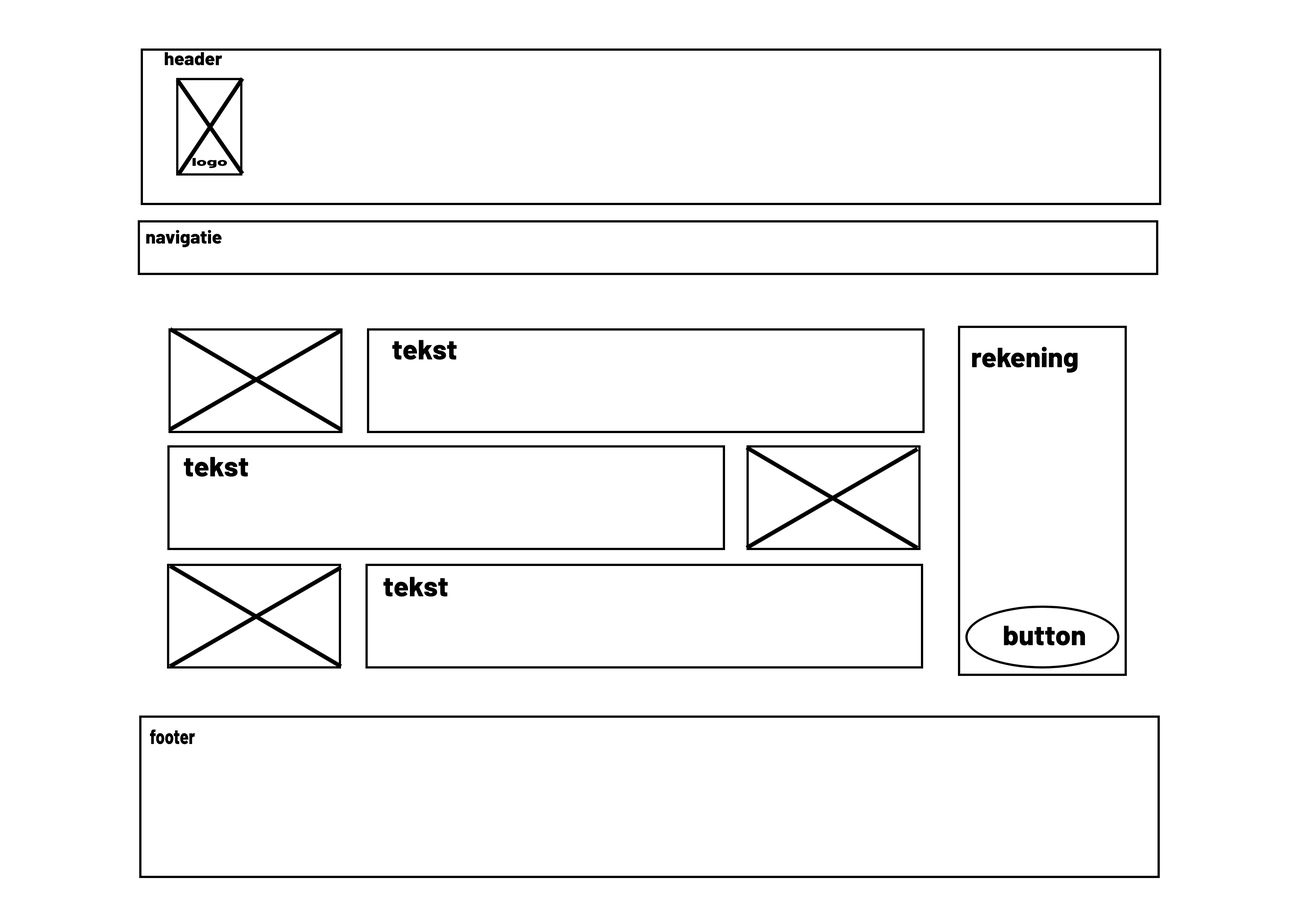
<style>
.page{position:relative;width:1299px;height:918px;background:#ffffff}
.page>*{position:absolute;margin:0}
.t1{font:18.5px "Barlow-ExtraBold";color:#000000}
.t2{font:11.2px "Barlow-ExtraBold";color:#000000;scale:1.66 1}
.t3{font:27.8px "Barlow-ExtraBold";color:#000000}
.t4{font:20.7px "Barlow-ExtraBold";color:#000000;scale:0.78 1}
</style>
<div class="page">
<p class="t1" style="left:165px;top:52px;width:57px;height:14px">header</p>
<p class="t2" style="left:193px;top:158px;width:34px;height:10px">logo</p>
<p class="t1" style="left:146px;top:230px;width:76px;height:17px">navigatie</p>
<p class="t3" style="left:392px;top:340px;width:65px;height:20px">tekst</p>
<p class="t3" style="left:972px;top:347px;width:105px;height:26px">rekening</p>
<p class="t3" style="left:184px;top:457px;width:64px;height:20px">tekst</p>
<p class="t3" style="left:383px;top:577px;width:65px;height:20px">tekst</p>
<p class="t3" style="left:1004px;top:626px;width:81px;height:20px">button</p>
<p class="t4" style="left:150px;top:729px;width:45px;height:16px">footer</p>
</div>
